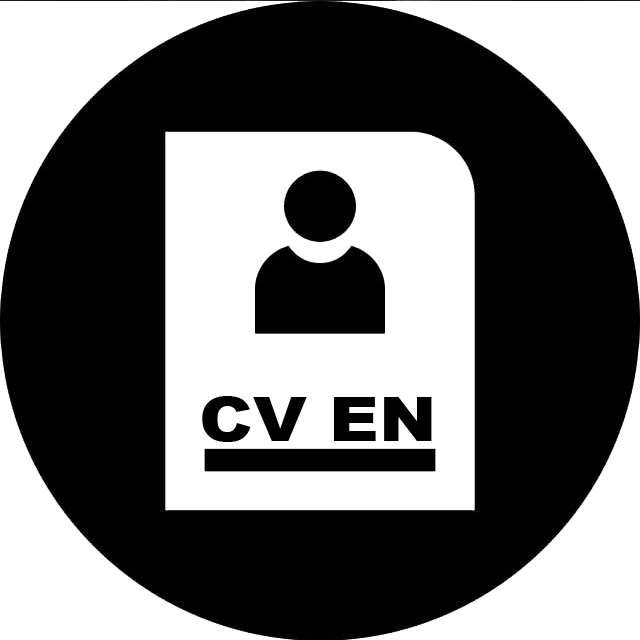
<style>
.page{position:relative;width:640px;height:640px;background:#000000}
.page>*{position:absolute;margin:0}
.t1{font:60.7px "Arial-Black";color:#000000;scale:1.13 1}
</style>
<div class="page">
<p class="t1" style="left:202px;top:395px;width:230px;height:46px">CV EN</p>
</div>
